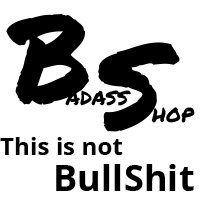
<style>
.page{position:relative;width:200px;height:200px;background:#ffffff}
.page>*{position:absolute;margin:0}
.t1{font:120px "PermanentMarker";letter-spacing:0.005em;color:#000000}
.t2{font:24px "PermanentMarker";letter-spacing:0.005em;color:#000000}
.t3{font:24px "NotoSans-Bold";letter-spacing:0.005em;color:#000000}
.t4{font:36px "NotoSans-Bold";letter-spacing:0.005em;color:#000000}
</style>
<div class="page">
<p class="t1" style="left:6px;top:13px;width:83px;height:92px">B</p>
<p class="t1" style="left:98px;top:42px;width:82px;height:90px">S</p>
<p class="t2" style="left:65px;top:90px;width:66px;height:16px">adass</p>
<p class="t2" style="left:151px;top:107px;width:44px;height:16px">hop</p>
<p class="t3" style="left:0px;top:137px;width:123px;height:18px">This is not</p>
<p class="t4" style="left:56px;top:164px;width:138px;height:27px">BullShit</p>
</div>
